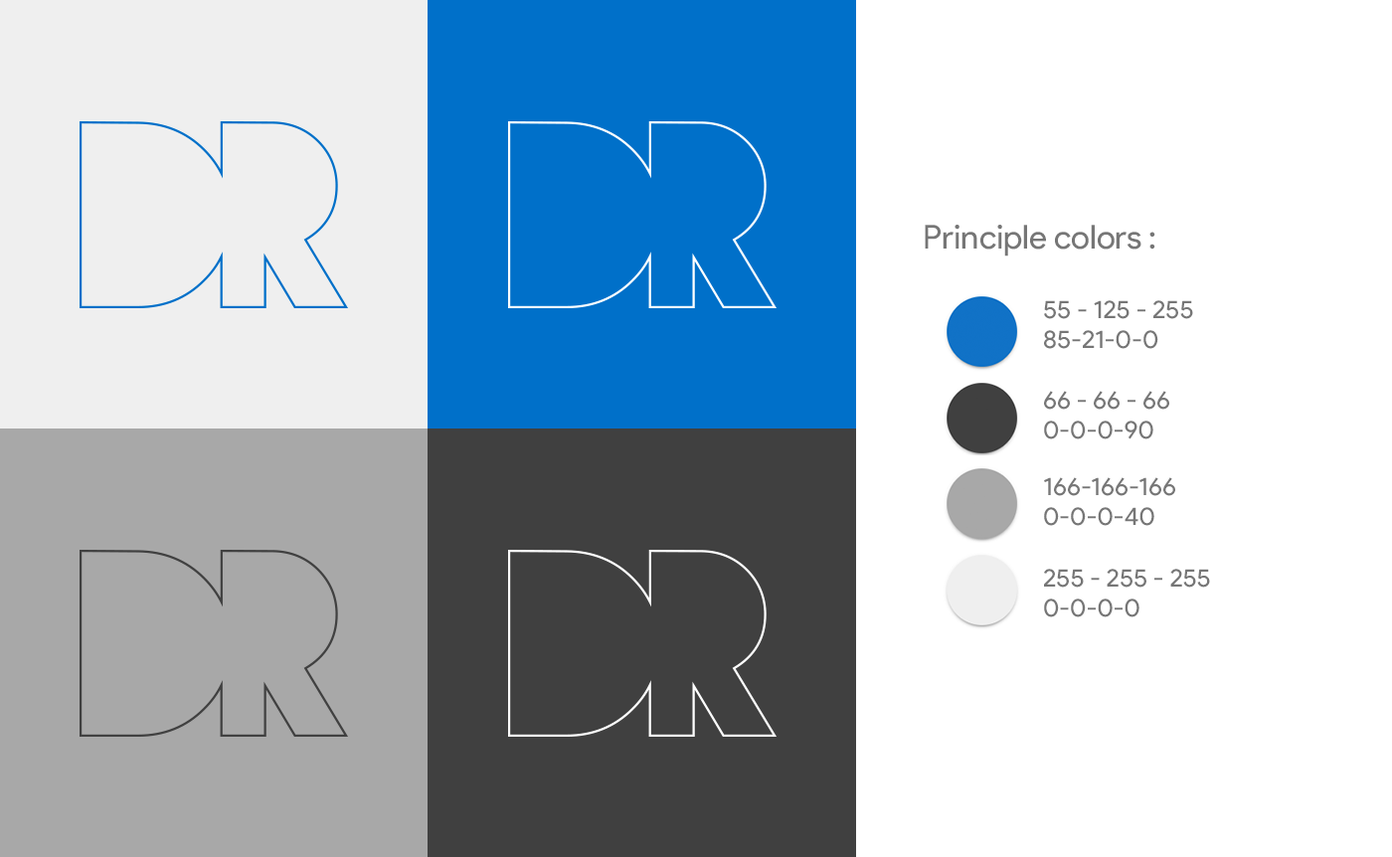
<style>
.page{position:relative;width:1392px;height:857px;background:#ffffff}
.page>*{position:absolute;margin:0}
.t1{font:33.1px "ProductSans-Regular";color:#767676}
.t2{font:25.1px/29.8px "ProductSans-Regular";color:#767676}
</style>
<div class="page">
<p class="t1" style="left:924px;top:225px;width:231px;height:31px">Principle colors :</p>
<p class="t2" style="left:1044px;top:300px;width:149px;height:49px">55 - 125 - 255<br>85-21-0-0</p>
<p class="t2" style="left:1044px;top:391px;width:125px;height:48px">66 - 66 - 66<br>0-0-0-90</p>
<p class="t2" style="left:1044px;top:477px;width:131px;height:49px">166-166-166<br>0-0-0-40</p>
<p class="t2" style="left:1044px;top:569px;width:166px;height:48px">255 - 255 - 255<br>0-0-0-0</p>
</div>
